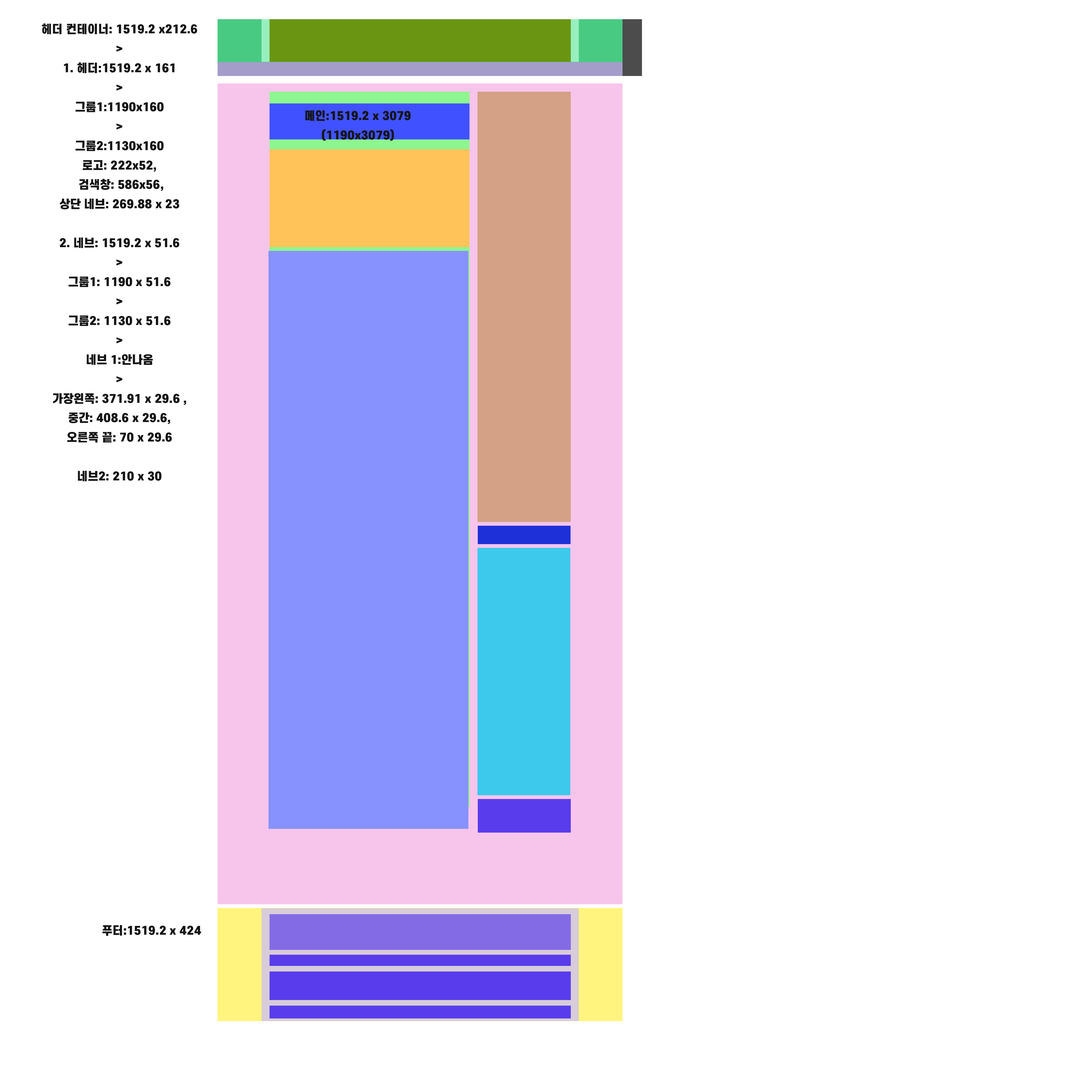
<style>
.page{position:relative;width:1092px;height:1092px;background:#ffffff}
.page>*{position:absolute;margin:0}
.t1{font:11.1px "S-CoreDream-9Black";color:#151515}
</style>
<div class="page">
<p class="t1" style="left:42px;top:23px;width:155px;height:458px;text-align:center">헤더 컨테이너: 1519.2 x212.6 <br>&gt;<br>1. 헤더:1519.2 x 161<br>&gt;<br>그룹1:1190x160<br>&gt;<br>그룹2:1130x160<br>로고: 222x52,<br> 검색창: 586x56,<br>상단 네브: 269.88 x 23 <br><br>2. 네브: 1519.2 x 51.6<br>&gt;<br>그룹1: 1190 x 51.6<br>&gt;<br>그룹2: 1130 x 51.6<br>&gt;<br>네브 1:안나옴<br>&gt;<br>가장왼쪽: 371.91 x 29.6 ,<br>중간: 408.6 x 29.6,<br>오른쪽 끝: 70 x 29.6<br><br>네브2: 210 x 30</p>
<p class="t1" style="left:305px;top:110px;width:106px;height:31px;text-align:center">메인:1519.2 x 3079<br>(1190x3079)</p>
<p class="t1" style="left:102px;top:925px;width:99px;height:11px">푸터:1519.2 x 424</p>
</div>
